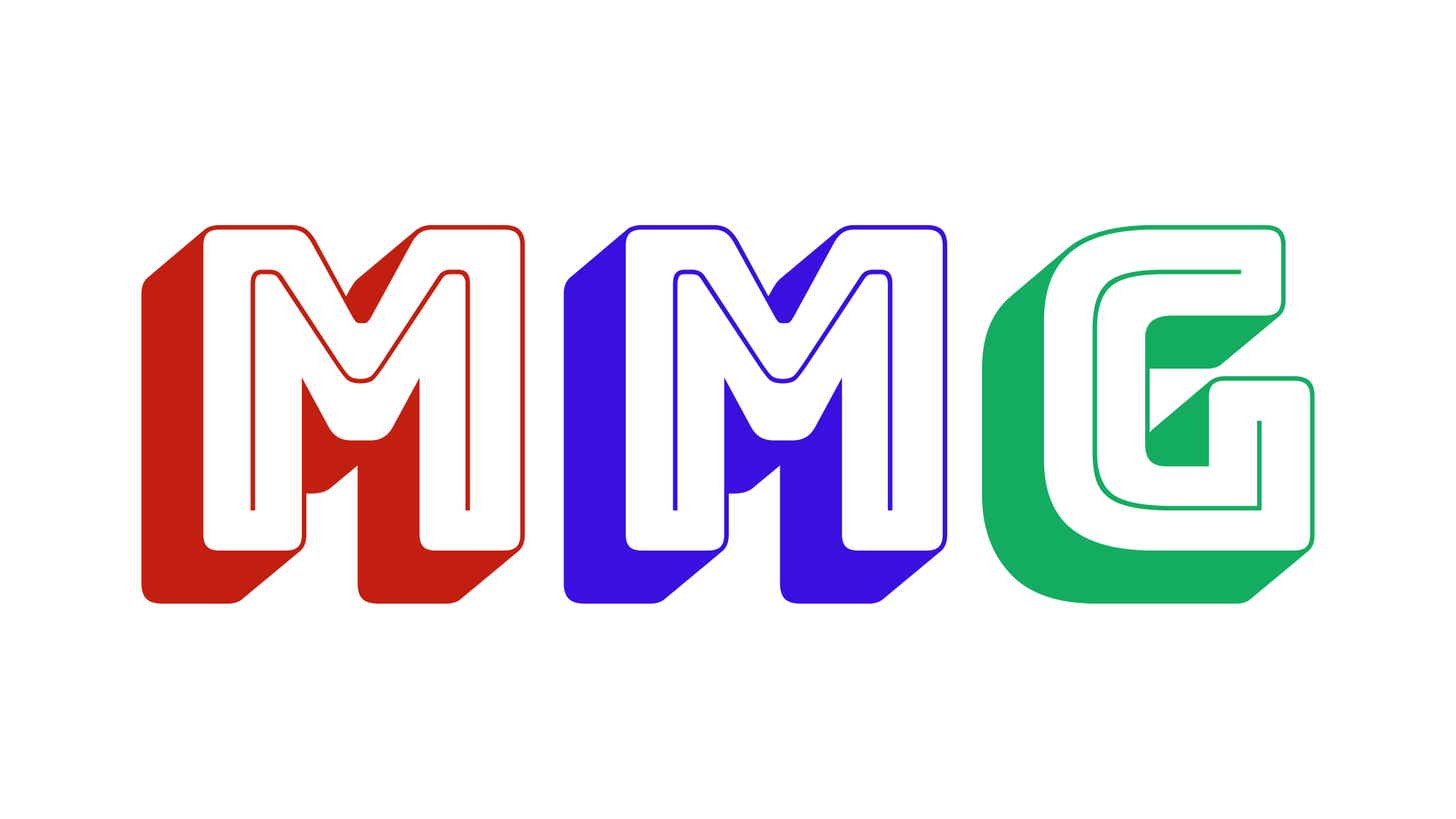
<style>
.page{position:relative;width:1456px;height:819px;background:#ffffff}
.page>*{position:absolute;margin:0}
.t1{font:445.8px "BungeeShade-Regular"}
</style>
<div class="page">
<p class="t1" style="left:141px;top:224px;width:1174px;height:380px">MMG</p>
</div>
